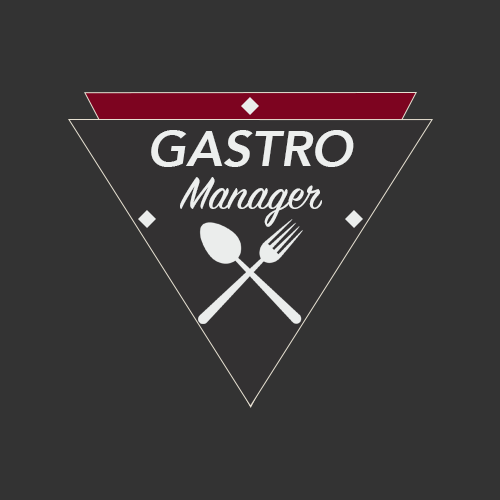
<style>
.page{position:relative;width:500px;height:500px;background:#333333}
.page>*{position:absolute;margin:0}
.t1{font:50px "Avenir-HeavyOblique";color:#edefee}
.t2{font:50px "SignPainter-HouseScript";color:#edefee}
</style>
<div class="page">
<p class="t1" style="left:151px;top:130px;width:203px;height:37px">GASTRO</p>
<p class="t2" style="left:180px;top:177px;width:142px;height:50px">Manager</p>
</div>
